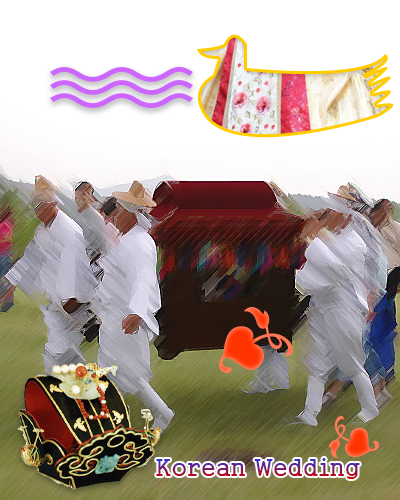
<style>
.page{position:relative;width:400px;height:500px}
.page>*{position:absolute;margin:0}
.t1{font:24px "Gungsuh"}
</style>
<div class="page">
<p class="t1" style="left:156px;top:458px;width:204px;height:21px">Korean Wedding</p>
</div>
